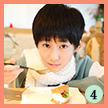
<style>
.page{position:relative;width:108px;height:108px}
.page>*{position:absolute;margin:0}
.t1{font:12px "DFNMing-XB-HK-BF";letter-spacing:0.1em;color:#000000;font-weight:bold}
</style>
<div class="page">
<p class="t1" style="left:90px;top:89px;width:7px;height:11px">4</p>
</div>
